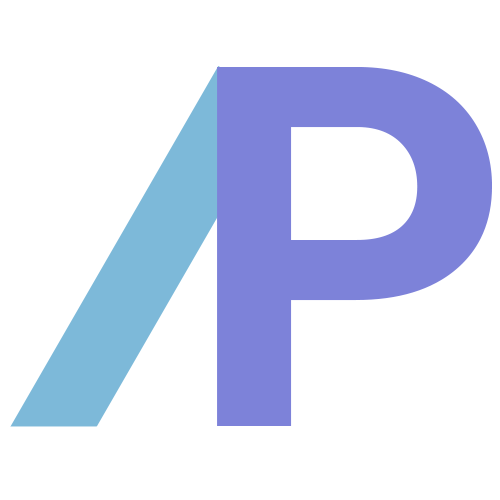
<style>
.page{position:relative;width:500px;height:500px;background:#ffffff}
.page>*{position:absolute;margin:0}
.t1{font:505.3px "Roboto-Bold";color:#7d82d9}
</style>
<div class="page">
<p class="t1" style="left:217px;top:67px;width:275px;height:359px">P</p>
</div>
